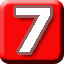
<style>
.page{position:relative;width:64px;height:64px;background:#f70909}
.page>*{position:absolute;margin:0}
.t1{font:60px "Meiryo-Bold";color:#ffffff}
</style>
<div class="page">
<p class="t1" style="left:16px;top:8px;width:34px;height:44px">7</p>
</div>
